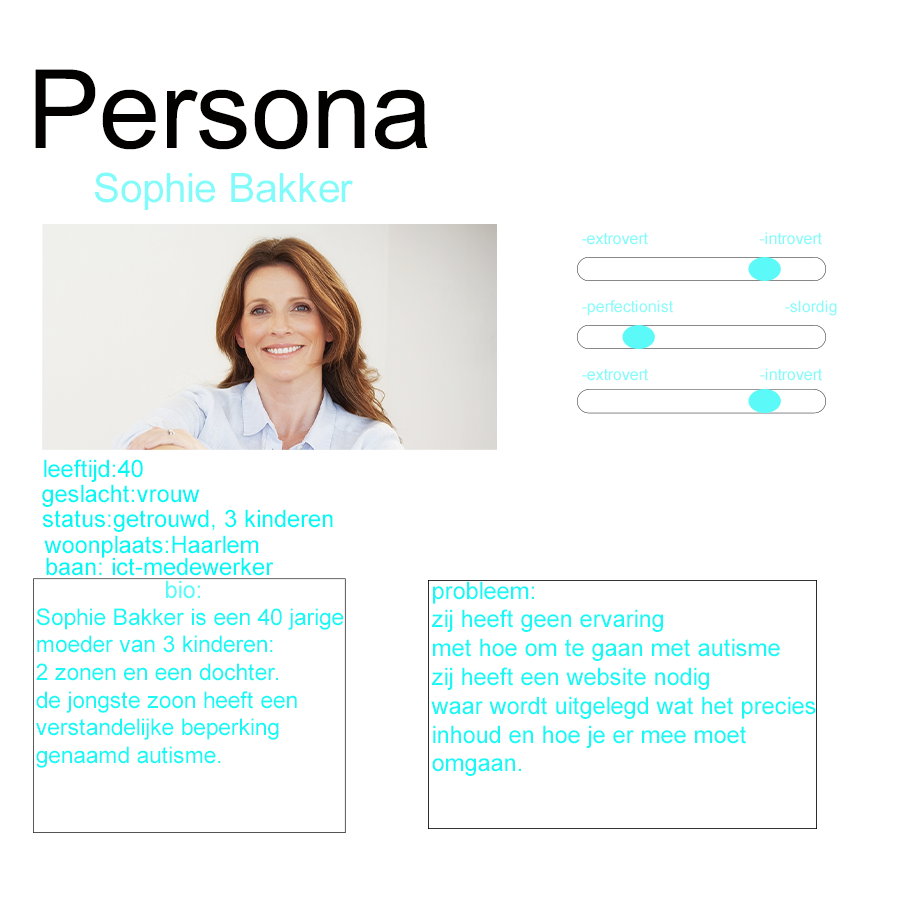
<style>
.page{position:relative;width:900px;height:900px;background:#ffffff}
.page>*{position:absolute;margin:0}
.t1{font:109.4px "ArialMT";color:#030000}
.t2{font:40.5px "ArialMT";color:#83fbfa}
.t3{font:16px "ArialMT";color:#83fbfa}
.t4{font:16px "ArialMT";color:#88fbfa}
.t5{font:24px "ArialMT";color:#06f8f5}
.t6{font:24px "ArialMT";color:#5bfaf8}
.t7{font:24px "ArialMT";color:#19f8f5}
.t8{font:23.1px "ArialMT";color:#19f8f5}
</style>
<div class="page">
<p class="t1" style="left:35px;top:69px;width:393px;height:81px">Persona</p>
<p class="t2" style="left:95px;top:172px;width:258px;height:38px">Sophie Bakker</p>
<p class="t3" style="left:582px;top:232px;width:240px;height:13px">-extrovert                            -introvert</p>
<p class="t4" style="left:582px;top:300px;width:255px;height:16px">-perfectionist                            -slordig</p>
<p class="t3" style="left:582px;top:368px;width:240px;height:13px">-extrovert                            -introvert</p>
<p class="t5" style="left:44px;top:459px;width:99px;height:23px">leeftijd:40</p>
<p class="t5" style="left:42px;top:484px;width:158px;height:23px">geslacht:vrouw</p>
<p class="t5" style="left:42px;top:509px;width:291px;height:23px">status:getrouwd, 3 kinderen</p>
<p class="t5" style="left:44px;top:535px;width:215px;height:23px">woonplaats:Haarlem</p>
<p class="t5" style="left:46px;top:557px;width:228px;height:19px">baan: ict-medewerker</p>
<p class="t6" style="left:166px;top:580px;width:34px;height:19px">bio:</p>
<p class="t7" style="left:431px;top:581px;width:385px;height:195px">probleem:<br>zij heeft geen ervaring<br>met hoe om te gaan met autisme<br>zij heeft een website nodig <br>waar wordt uitgelegd wat het precies <br>inhoud en hoe je er mee moet<br>omgaan.</p>
<p class="t8" style="left:36px;top:608px;width:308px;height:160px">Sophie Bakker is een 40 jarige<br>moeder van 3 kinderen:<br>2 zonen en een dochter.<br>de jongste zoon heeft een <br>verstandelijke beperking <br>genaamd autisme.</p>
</div>
